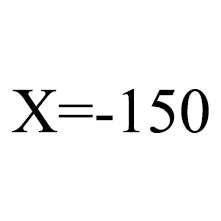
<style>
.page{position:relative;width:221px;height:221px;background:#ffffff}
.page>*{position:absolute;margin:0}
.t1{font:63.9px "TimesNewRomanPSMT";color:#000000}
</style>
<div class="page">
<p class="t1" style="left:12px;top:89px;width:197px;height:44px">X=-150</p>
</div>
